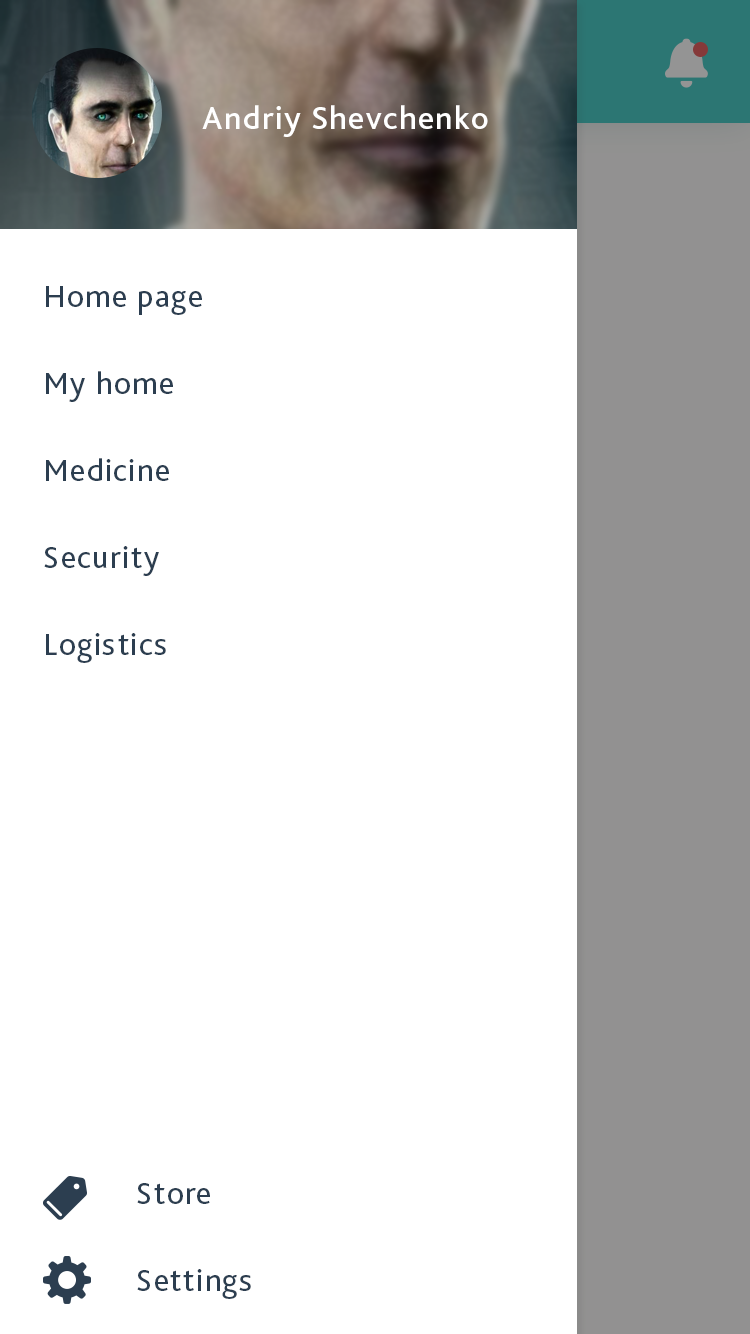
<style>
.page{position:relative;width:750px;height:1334px;background:#ffffff}
.page>*{position:absolute;margin:0}
.t1{font:33.3px "BlissPro-Medium";letter-spacing:0.04em;color:#ffffff}
.t2{font:32.1px/87px "BlissPro";letter-spacing:0.04em;color:#2c3e50}
</style>
<div class="page">
<p class="t1" style="left:202px;top:105px;width:286px;height:32px">Andriy Shevchenko</p>
<p class="t2" style="left:44px;top:286px;width:158px;height:377px">Home page<br>My home<br>Medicine<br>Security<br>Logistics</p>
<p class="t2" style="left:137px;top:1183px;width:114px;height:116px">Store<br>Settings</p>
</div>
